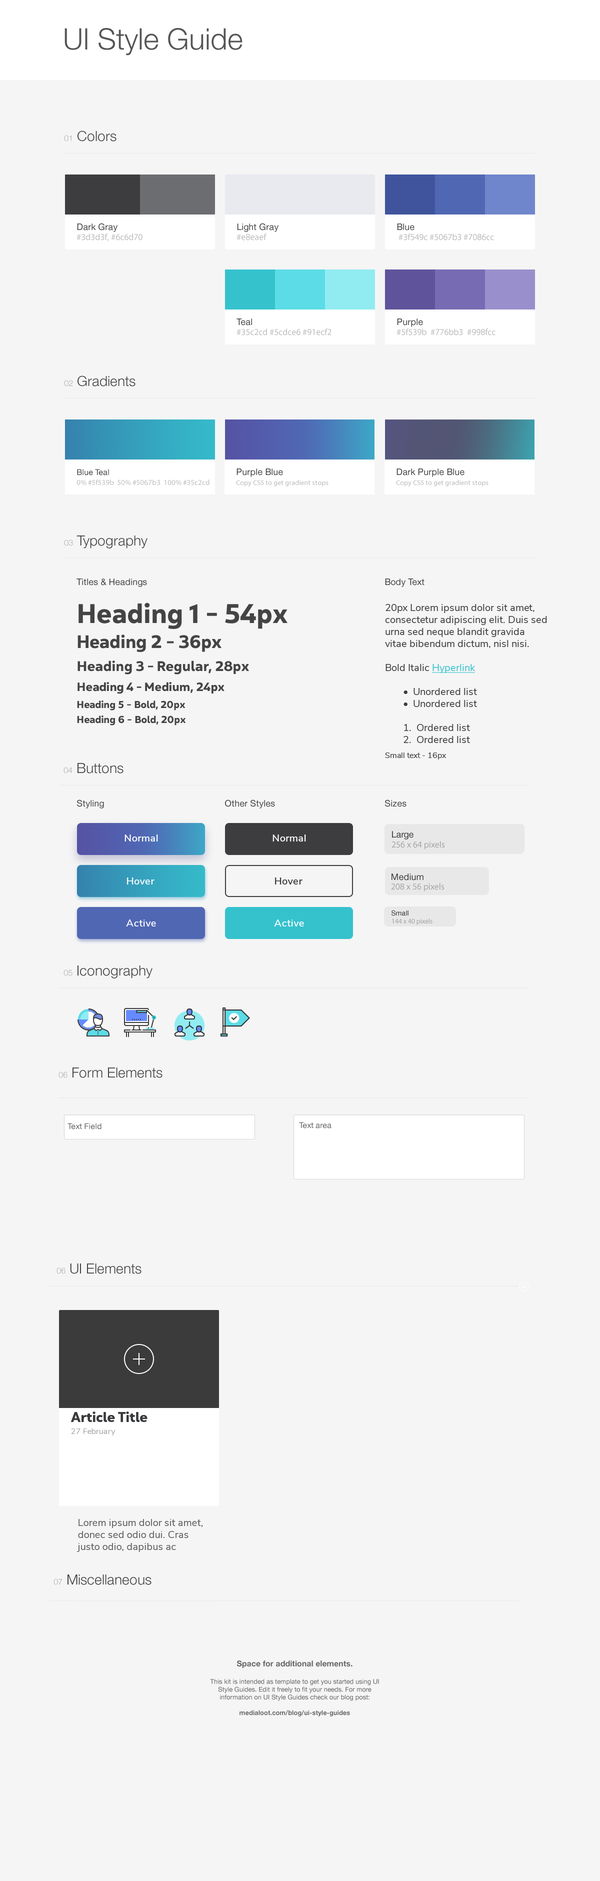
<style>
.page{position:relative;width:600px;height:1881px;background:#f5f5f5}
.page>*{position:absolute;margin:0}
.t1{font:29.5px "HelveticaNeue-Light";color:#555555}
.t2{font:14px "HelveticaNeue-Light";color:#444444}
.t3{font:8px "HelveticaNeue-Light";color:#aaaaaa}
.t4{font:9px/10px "MyriadPro-Regular";color:#bbbbbb}
.t5{font:9px "HelveticaNeue";color:#444444}
.t6{font:7.5px/10px "MyriadPro-Regular";color:#bbbbbb}
.t7{font:8px "HelveticaNeue";color:#444444}
.t8{font:7px/10px "MyriadPro-Regular";color:#bbbbbb}
.t9{font:14px/23px "Yorkten-NorBol";color:#444444}
.t10{font:27px/25px "Yorkten-NorBol";color:#444444}
.t11{font:18px/25px "Yorkten-NorBol";color:#444444}
.t12{font:12px/20px "Yorkten-NorBol";color:#444444}
.t13{font:10px/17px "Yorkten-NorBol";color:#444444}
.t14{font:10px/15px "Yorkten-NorBol";color:#444444}
.t15{font:10px/12px "NunitoSans-Regular";color:#3d3d3f}
.t16{font:10px/12px "NunitoSans-Regular";color:#35c2cd;text-decoration:underline}
.t17{font:8px/15px "NunitoSans-Regular";color:#444444}
.t18{font:9px "HelveticaNeue";color:#3b3b3b}
.t19{font:10px "NunitoSans-SemiBold";letter-spacing:0.025em;color:#ffffff}
.t20{font:9px "MyriadPro-Regular";color:#a4a4a4}
.t21{font:10px "NunitoSans-SemiBold";letter-spacing:0.025em;color:#3d3d3f}
.t22{font:7px "HelveticaNeue";color:#3b3b3b}
.t23{font:7px "MyriadPro-Regular";color:#a4a4a4}
.t24{font:8px "HelveticaNeue";color:#666666}
.t25{font:14px/11px "Yorkten-NorBol";color:#393a3c}
.t26{font:8px/12px "Nunito-Regular";color:#aaaaaa}
.t27{font:10px/12px "NunitoSans-Regular";color:#666666}
.t28{font:6.5px "HelveticaNeue";color:#666666}
.t29{font:8px "HelveticaNeue-Bold";color:#666666}
.t30{font:6.5px "HelveticaNeue-Bold";color:#666666}
</style>
<div class="page">
<p class="t1" style="left:64px;top:28px;width:178px;height:28px">UI Style Guide</p>
<p class="t2" style="left:64px;top:130px;width:52px;height:12px"><span class="t3">01</span> Colors</p>
<p class="t4" style="left:76px;top:223px;width:66px;height:19px"><span class="t5">Dark Gray<br></span>#3d3d3f, #6c6d70</p>
<p class="t5" style="left:236px;top:223px;width:42px;height:17px">Light Gray<br><span class="t4">#e8eaef</span></p>
<p class="t4" style="left:397px;top:224px;width:97px;height:16px"><span class="t5">Blue<br></span> #3f549c #5067b3 #7086cc</p>
<p class="t4" style="left:236px;top:318px;width:96px;height:18px"><span class="t5">Teal<br></span>#35c2cd #5cdce6 #91ecf2</p>
<p class="t4" style="left:396px;top:318px;width:100px;height:18px"><span class="t5">Purple<br></span>#5f539b  #776bb3  #998fcc</p>
<p class="t2" style="left:64px;top:376px;width:72px;height:10px"><span class="t3">02</span> Gradients</p>
<p class="t6" style="left:76px;top:469px;width:134px;height:16px"><span class="t7">Blue Teal<br></span>0% #5f539b  50% #5067b3  100% #35c2cd</p>
<p class="t8" style="left:236px;top:468px;width:92px;height:18px"><span class="t5">Purple Blue<br></span>Copy CSS to get gradient stops</p>
<p class="t8" style="left:396px;top:468px;width:92px;height:18px"><span class="t5">Dark Purple Blue<br></span>Copy CSS to get gradient stops</p>
<p class="t2" style="left:64px;top:536px;width:84px;height:12px"><span class="t3">03</span> Typography</p>
<p class="t5" style="left:76px;top:578px;width:71px;height:9px">Titles &amp; Headings</p>
<p class="t5" style="left:385px;top:578px;width:39px;height:9px">Body Text</p>
<p class="t9" style="left:77px;top:602px;width:211px;height:124px"><span class="t10">Heading 1 - 54px<br></span><span class="t11">Heading 2 - 36px<br></span>Heading 3 - Regular, 28px<br><span class="t12">Heading 4 - Medium, 24px<br></span><span class="t13">Heading 5 - Bold, 20px<br></span><span class="t14">Heading 6 - Bold, 20px</span></p>
<p class="t15" style="left:385px;top:604px;width:162px;height:156px">20px Lorem ipsum dolor sit amet, consectetur adipiscing elit. Duis sed urna sed neque blandit gravida vitae bibendum dictum, nisl nisi.<br><br>Bold Italic <span class="t16">Hyperlink <br><br></span> •  Unordered list<br> •  Unordered list<br><br> 1.  Ordered list<br> 2.  Ordered list<br><span class="t17">Small text - 16px</span></p>
<p class="t2" style="left:64px;top:763px;width:60px;height:11px"><span class="t3">04</span> Buttons</p>
<p class="t5" style="left:77px;top:800px;width:27px;height:8px">Styling</p>
<p class="t5" style="left:225px;top:800px;width:50px;height:8px">Other Styles</p>
<p class="t5" style="left:385px;top:800px;width:21px;height:7px">Sizes</p>
<p class="t18" style="left:392px;top:831px;width:22px;height:9px">Large</p>
<p class="t19" style="left:124px;top:834px;width:34px;height:8px">Normal</p>
<p class="t19" style="left:272px;top:834px;width:34px;height:8px">Normal</p>
<p class="t20" style="left:392px;top:841px;width:53px;height:9px">256 x 64 pixels</p>
<p class="t19" style="left:127px;top:878px;width:27px;height:6px">Hover</p>
<p class="t21" style="left:275px;top:878px;width:27px;height:6px">Hover</p>
<p class="t18" style="left:392px;top:874px;width:32px;height:6px">Medium</p>
<p class="t20" style="left:391px;top:883px;width:53px;height:9px">208 x 56 pixels</p>
<p class="t22" style="left:392px;top:910px;width:16px;height:6px">Small</p>
<p class="t19" style="left:126px;top:920px;width:30px;height:6px">Active</p>
<p class="t19" style="left:274px;top:920px;width:30px;height:6px">Active</p>
<p class="t23" style="left:392px;top:918px;width:40px;height:7px">144 x 40 pixels</p>
<p class="t2" style="left:64px;top:966px;width:88px;height:12px"><span class="t3">05</span> Iconography</p>
<p class="t2" style="left:58px;top:1068px;width:104px;height:10px"><span class="t3">06</span> Form Elements</p>
<p class="t24" style="left:68px;top:1123px;width:34px;height:7px">Text Field</p>
<p class="t24" style="left:299px;top:1122px;width:33px;height:6px">Text area</p>
<p class="t2" style="left:56px;top:1264px;width:86px;height:10px"><span class="t3">06</span> UI Elements</p>
<p class="t25" style="left:70px;top:1412px;width:78px;height:24px">Article Title<br><span class="t26">27 February</span></p>
<p class="t27" style="left:77px;top:1519px;width:125px;height:33px">Lorem ipsum dolor sit amet, donec sed odio dui. Cras justo odio, dapibus ac facilisis in. Egestas eget quam.</p>
<p class="t2" style="left:54px;top:1574px;width:98px;height:11px"><span class="t3">07</span> Miscellaneous</p>
<p class="t28" style="left:210px;top:1660px;width:169px;height:56px;text-align:center"><span class="t29">Space for additional elements.<br><br></span>This kit is intended as template to get you started using UI Style Guides. Edit it freely to fit your needs. For more information on UI Style Guides check our blog post:<br><br><span class="t30">medialoot.com/blog/ui-style-guides</span></p>
</div>
